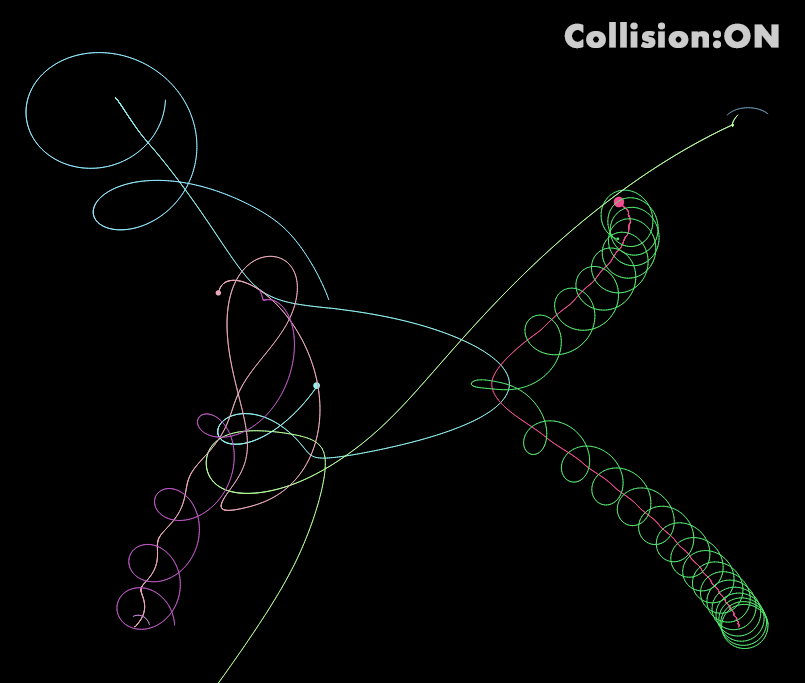
<style>
.page{position:relative;width:805px;height:683px;background:#000000}
.page>*{position:absolute;margin:0}
.t1{font:30px "Futura-Bold";letter-spacing:0.025em;color:#cccccc;font-weight:bold}
</style>
<div class="page">
<p class="t1" style="left:564px;top:22px;width:215px;height:27px">Collision:ON</p>
</div>
